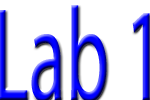
<style>
.page{position:relative;width:150px;height:100px;background:#ffffff}
.page>*{position:absolute;margin:0}
.t1{font:133.2px "MyriadPro-Regular";scale:0.57 1}
</style>
<div class="page">
<p class="t1" style="left:0px;top:5px;width:150px;height:97px">Lab 1</p>
</div>
